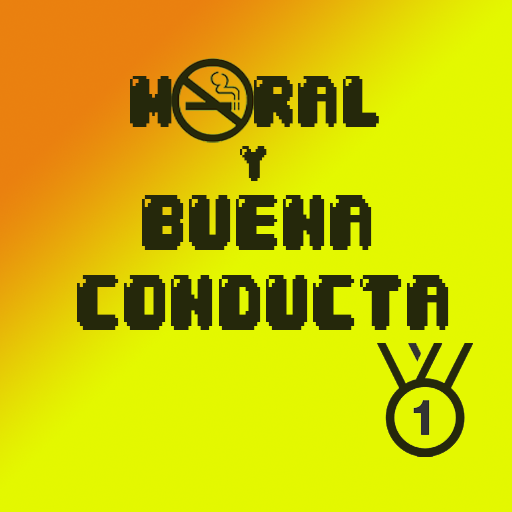
<style>
.page{position:relative;width:512px;height:512px;background:#e4f800}
.page>*{position:absolute;margin:0}
.t1{font:62.5px "04b30";color:#25280b;scale:0.75 1}
.t2{font:50px "04b30";color:#25280b;scale:0.75 1}
.t3{font:66.7px "04b30";color:#25280b;scale:0.75 1}
.t4{font:57.2px "04b30";color:#25280b;scale:0.75 1}
</style>
<div class="page">
<p class="t1" style="left:130px;top:76px;width:249px;height:51px">M  RAL</p>
<p class="t2" style="left:240px;top:146px;width:27px;height:35px">y</p>
<p class="t3" style="left:77px;top:195px;width:372px;height:135px"><span class="t4"> </span> BUENA <br>CONDUCTA</p>
</div>
